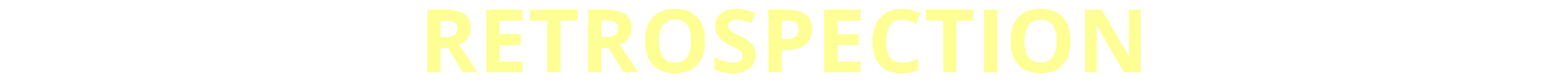
<style>
.page{position:relative;width:1568px;height:84px;background:#ffffff}
.page>*{position:absolute;margin:0}
.t1{font:88.2px "OpenSans-Bold";letter-spacing:0.01em;color:#fdff94;text-transform:uppercase}
</style>
<div class="page">
<p class="t1" style="left:427px;top:9px;width:715px;height:65px">retrospection</p>
</div>
